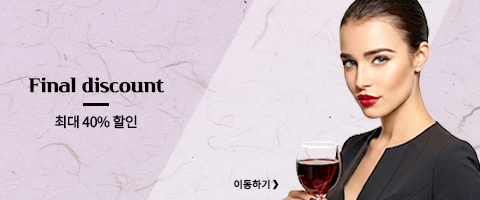
<style>
.page{position:relative;width:480px;height:200px}
.page>*{position:absolute;margin:0}
.t1{font:20px "Cafe24Danjunghae";letter-spacing:-0.025em;color:#000000;font-weight:bold}
.t2{font:14px "NotoSansKR-Regular";letter-spacing:-0.025em;color:#000000;font-weight:bold}
.t3{font:10px "NotoSansKR-Medium";letter-spacing:-0.025em;color:#000000;font-weight:bold}
.t4{font:12px "KBLJump_BTTF";letter-spacing:-0.025em;color:#000000;font-weight:bold}
</style>
<div class="page">
<p class="t1" style="left:28px;top:77px;width:136px;height:16px">Final discount</p>
<p class="t2" style="left:55px;top:115px;width:82px;height:14px">최대 40% 할인</p>
<p class="t3" style="left:234px;top:179px;width:36px;height:11px">이동하기</p>
<p class="t4" style="left:273px;top:179px;width:6px;height:11px">&gt;</p>
</div>
